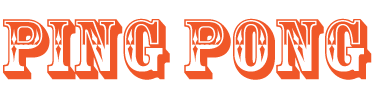
<style>
.page{position:relative;width:380px;height:100px;background:#ffffff}
.page>*{position:absolute;margin:0}
.t1{font:80px "RosewoodStd-Regular";color:#f05728}
</style>
<div class="page">
<p class="t1" style="left:3px;top:18px;width:369px;height:62px">Ping Pong</p>
</div>
